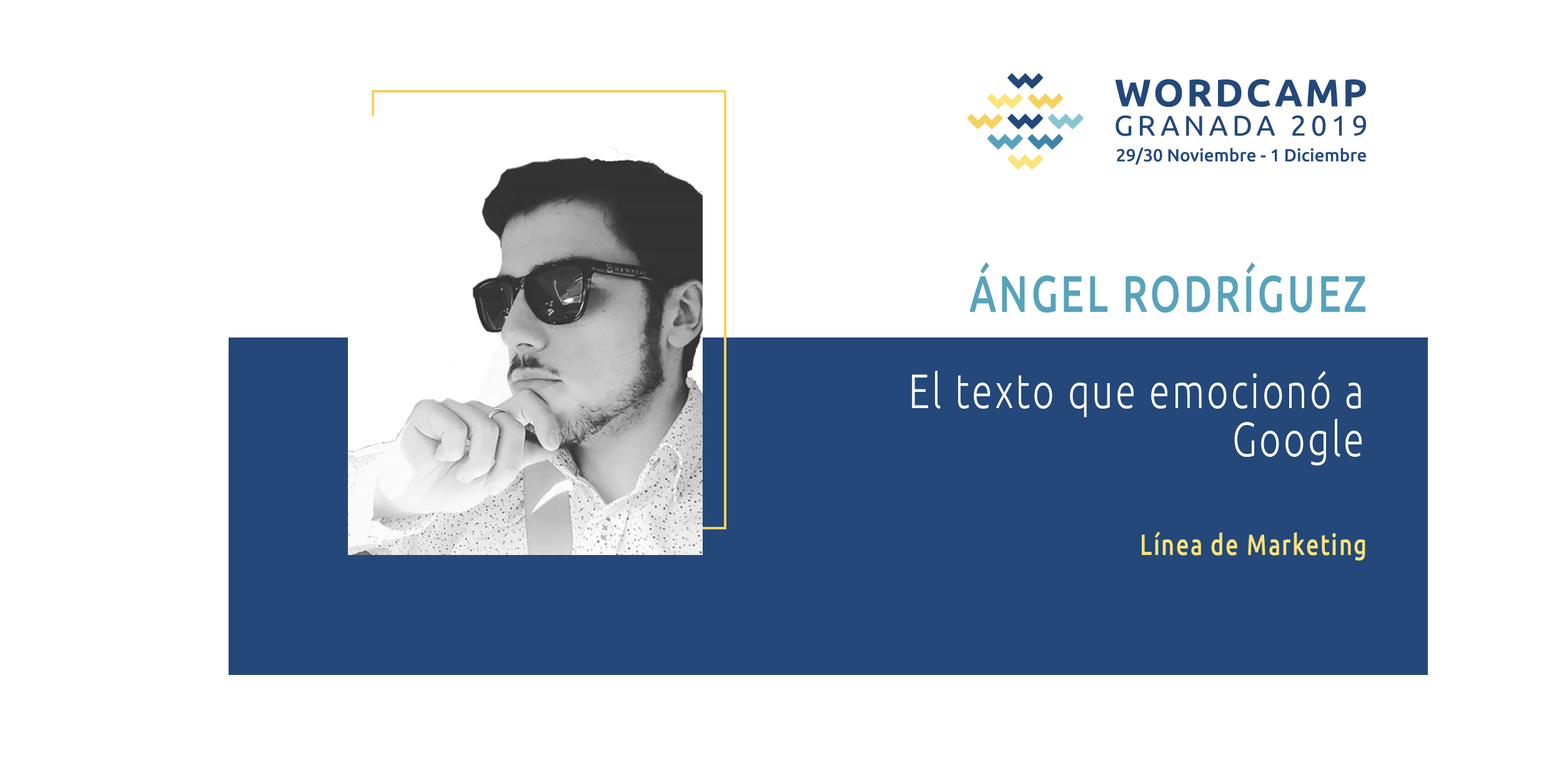
<style>
.page{position:relative;width:1559px;height:765px;background:#ffffff}
.page>*{position:absolute;margin:0}
.t1{font:51.4px "Ubuntu-Medium";letter-spacing:0.068em;color:#57a3bb;scale:0.77 1}
.t2{font:48.2px/48.2px "Ubuntu-Light";letter-spacing:0.068em;color:#ffffff;scale:0.77 1}
.t3{font:29.2px "Ubuntu-Medium";letter-spacing:0.068em;color:#f9e37b;scale:0.77 1}
</style>
<div class="page">
<p class="t1" style="left:970px;top:262px;width:396px;height:51px">ÁNGEL RODRÍGUEZ</p>
<p class="t2" style="left:912px;top:370px;width:450px;height:95px;text-align:right">El texto que emocionó a Google</p>
<p class="t3" style="left:1142px;top:531px;width:224px;height:29px">Línea de Marketing</p>
</div>
